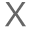
<style>
.page{position:relative;width:30px;height:30px;background:#ffffff}
.page>*{position:absolute;margin:0}
.t1{font:45px "NanumSquareR";color:#666666}
</style>
<div class="page">
<p class="t1" style="left:5px;top:2px;width:21px;height:25px">x</p>
</div>
